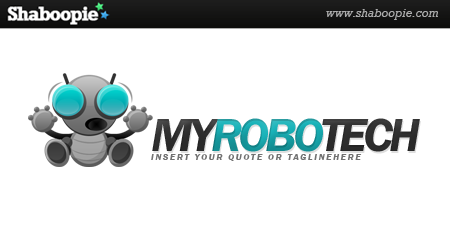
<style>
.page{position:relative;width:450px;height:250px;background:#ffffff}
.page>*{position:absolute;margin:0}
.t1{font:48px "FranklinGothic-DemiItalic";letter-spacing:-0.075em;color:#19b3b9}
.t2{font:48px "FranklinGothic-DemiItalic";letter-spacing:-0.075em;color:#343434}
.t3{font:9px "FranklinGothic-DemiItalic";letter-spacing:0.2em;color:#717171}
</style>
<div class="page">
<p class="t1" style="left:152px;top:118px;width:268px;height:34px"><span class="t2">MY</span>ROBO<span class="t2">TECH</span></p>
<p class="t3" style="left:151px;top:154px;width:211px;height:7px">INSERT YOUR QUOTE OR TAGLINEHERE</p>
</div>
